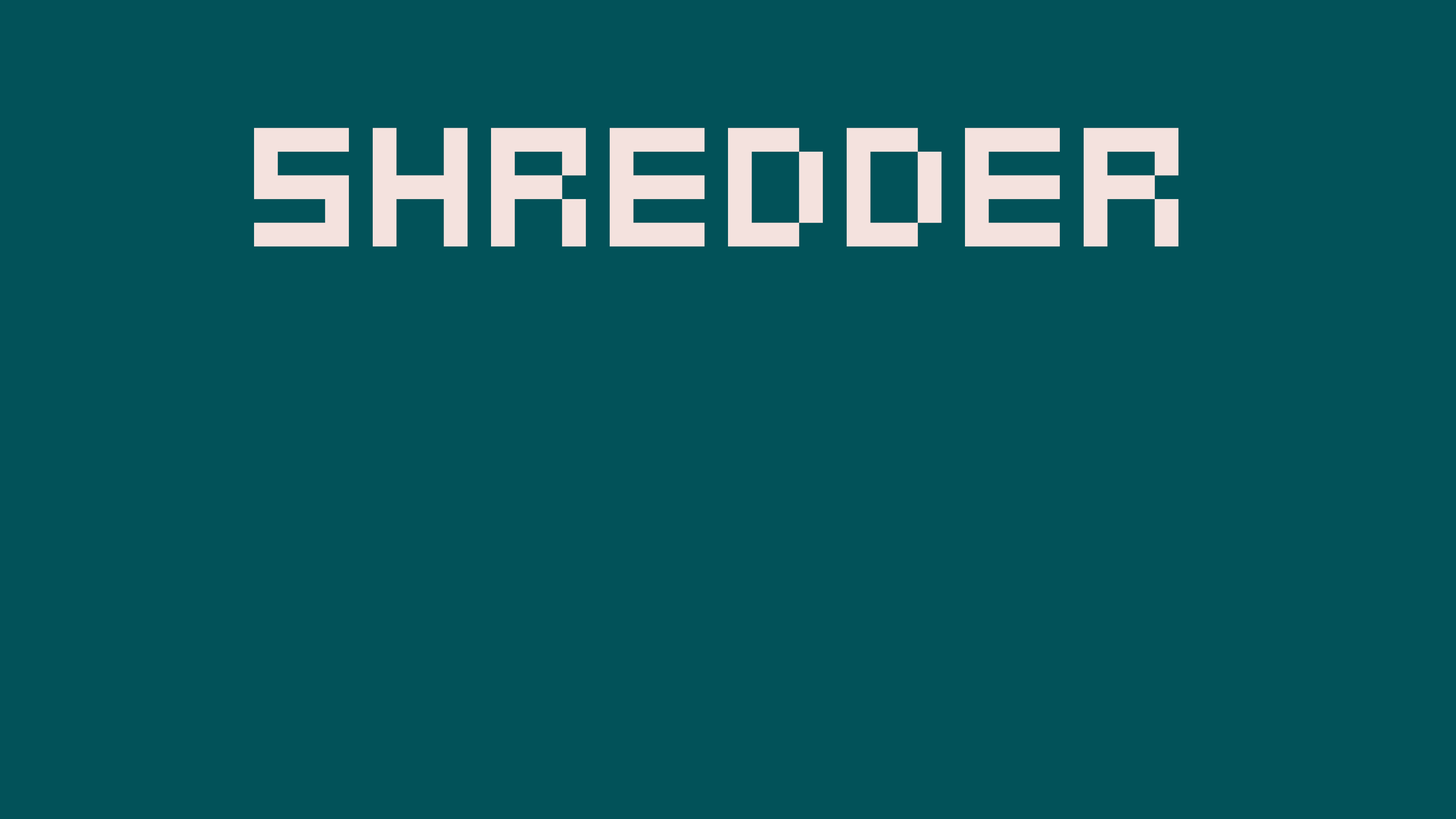
<style>
.page{position:relative;width:1456px;height:819px;background:#025259}
.page>*{position:absolute;margin:0}
.t1{font:189.6px "Kenney-Mini-Square";color:#f4e2de}
</style>
<div class="page">
<p class="t1" style="left:254px;top:128px;width:924px;height:118px">Shredder</p>
</div>
